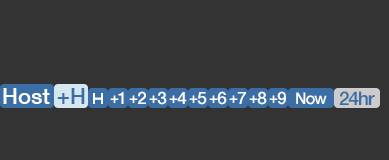
<style>
.page{position:relative;width:389px;height:160px;background:#333333}
.page>*{position:absolute;margin:0}
.t1{font:22px "HelveticaNeue-Medium";color:#ffffff}
.t2{font:22px "HelveticaNeue-Medium";color:#3a6ea5}
.t3{font:15px "HelveticaNeue-Medium";letter-spacing:-0.1em;color:#ffffff}
.t4{font:17px "HelveticaNeue-Medium";letter-spacing:-0.12em;color:#ffffff}
.t5{font:15px "HelveticaNeue-Medium";letter-spacing:-0.06em;color:#ffffff}
.t6{font:16px "HelveticaNeue-Medium";letter-spacing:-0.06em;color:#ffffff}
.t7{font:19px "HelveticaNeue-Medium";letter-spacing:-0.06em;color:#3a6ea5}
</style>
<div class="page">
<p class="t1" style="left:3px;top:88px;width:47px;height:16px">Host</p>
<p class="t2" style="left:57px;top:88px;width:28px;height:16px">+H</p>
<p class="t3" style="left:110px;top:92px;width:14px;height:12px">+<span class="t4">1</span></p>
<p class="t5" style="left:129px;top:91px;width:17px;height:13px">+<span class="t4">2</span></p>
<p class="t5" style="left:149px;top:91px;width:18px;height:14px">+<span class="t4">3</span></p>
<p class="t5" style="left:169px;top:92px;width:18px;height:12px">+<span class="t4">4</span></p>
<p class="t5" style="left:189px;top:92px;width:18px;height:13px">+<span class="t4">5</span></p>
<p class="t5" style="left:209px;top:91px;width:18px;height:14px">+<span class="t4">6</span></p>
<p class="t5" style="left:229px;top:92px;width:17px;height:12px">+<span class="t4">7</span></p>
<p class="t5" style="left:249px;top:91px;width:18px;height:14px">+<span class="t4">8</span></p>
<p class="t5" style="left:269px;top:91px;width:17px;height:14px">+<span class="t4">9</span></p>
<p class="t6" style="left:296px;top:92px;width:31px;height:13px">Now</p>
<p class="t7" style="left:339px;top:91px;width:36px;height:14px">24hr</p>
</div>
